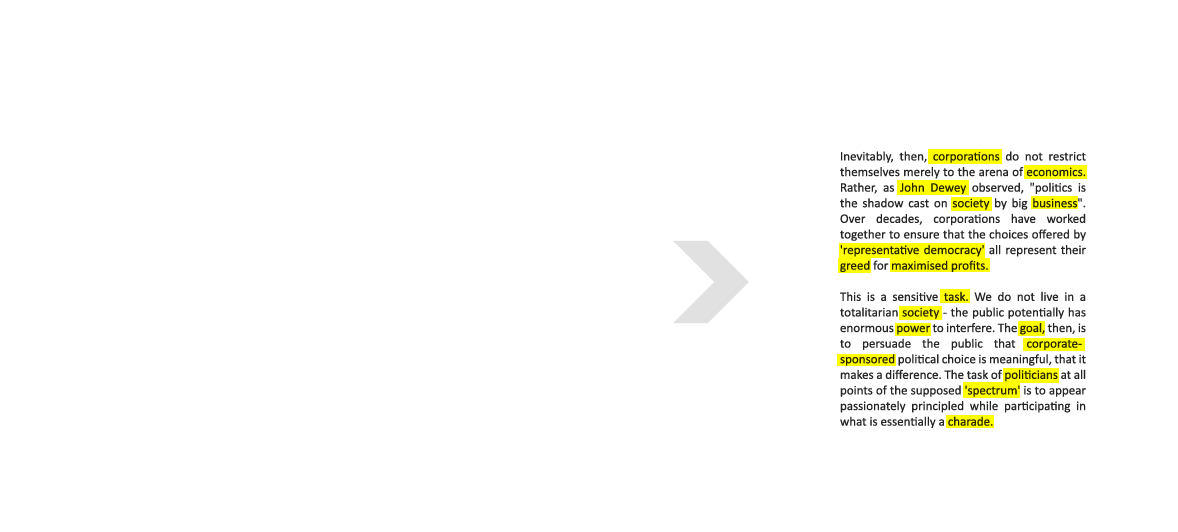
<style>
.page{position:relative;width:1178px;height:532px;background:#ffffff}
.page>*{position:absolute;margin:0}
.t1{font:13px "Calibri";color:#262626}
</style>
<div class="page">
<p class="t1" style="left:840px;top:151px;width:246px;height:277px;text-align:justify">Inevitably, then, corporations do not restrict themselves merely to the arena of economics. Rather, as John Dewey observed, "politics is the shadow cast on society by big business". Over decades, corporations have worked together to ensure that the choices offered by 'representative democracy' all represent their greed for maximised profits.<br><br>This is a sensitive task. We do not live in a totalitarian society - the public potentially has enormous power to interfere. The goal, then, is to persuade the public that corporate-sponsored political choice is meaningful, that it makes a difference. The task of politicians at all points of the supposed 'spectrum' is to appear passionately principled while participating in what is essentially a charade.</p>
</div>
